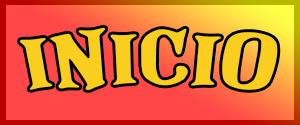
<style>
.page{position:relative;width:300px;height:125px;background:#ff4747}
.page>*{position:absolute;margin:0}
.t1{font:58.6px "MagnificentSerif";color:#face1f;scale:1.47 1}
</style>
<div class="page">
<p class="t1" style="left:20px;top:27px;width:258px;height:63px">INICIO</p>
</div>
